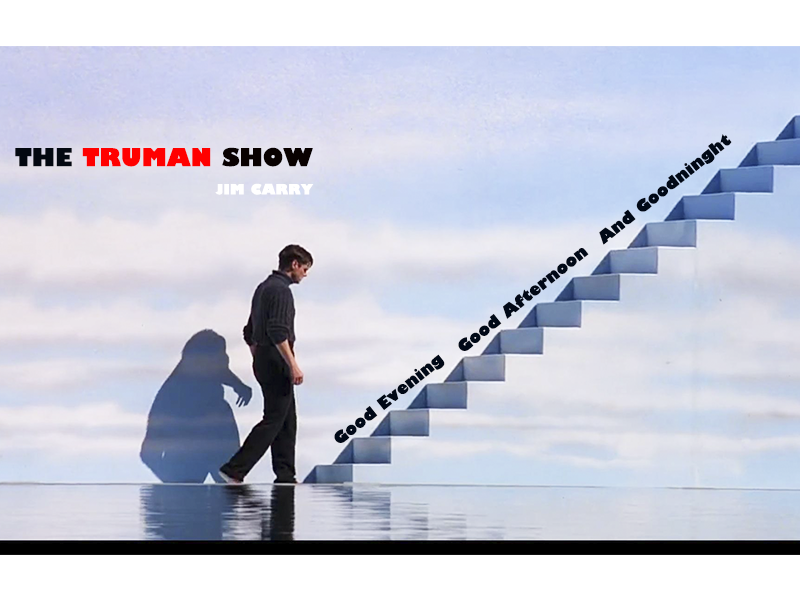
<style>
.page{position:relative;width:800px;height:600px}
.page>*{position:absolute;margin:0}
.t1{font:16px "TrumaniaEENPlain";color:#010917}
.t2{font:24px "TrumaniaEENPlain";color:#ff0000}
.t3{font:24px "TrumaniaEENPlain";color:#030811}
.t4{font:24px "TrumaniaEENPlain";color:#090101}
.t5{font:14px "TrumaniaEENPlain";color:#ffffff}
</style>
<div class="page">
<p class="t1" style="left:599px;top:134px;width:133px;height:111px;rotate:-38deg">And Goodninght</p>
<p class="t2" style="left:15px;top:147px;width:298px;height:20px"><span class="t3">THE </span>TRUMAN <span class="t4">SHOW</span></p>
<p class="t5" style="left:215px;top:183px;width:99px;height:12px">JIM CARRY</p>
<p class="t1" style="left:458px;top:248px;width:131px;height:103px;rotate:-38deg">Good Afternoon</p>
<p class="t1" style="left:334px;top:354px;width:111px;height:89px;rotate:-38deg">Good Evening</p>
</div>
